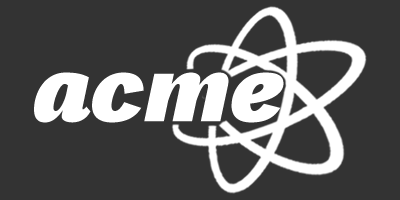
<style>
.page{position:relative;width:400px;height:200px;background:#333333}
.page>*{position:absolute;margin:0}
.t1{font:86.7px "Frock-BlackItalic";color:#ffffff}
</style>
<div class="page">
<p class="t1" style="left:34px;top:72px;width:250px;height:51px">acme</p>
</div>
